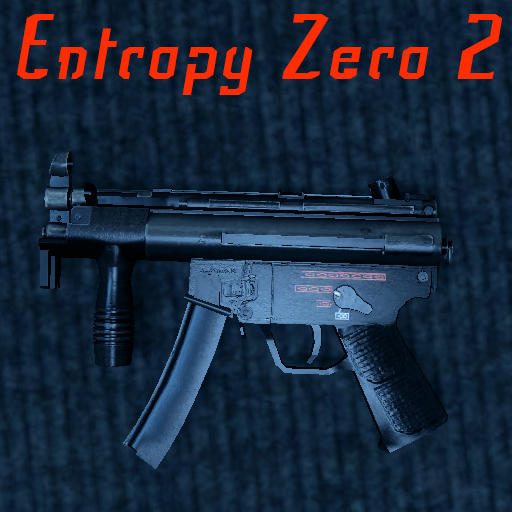
<style>
.page{position:relative;width:512px;height:512px}
.page>*{position:absolute;margin:0}
.t1{font:87.5px "Frak-Regular";color:#ff2e00}
</style>
<div class="page">
<p class="t1" style="left:17px;top:14px;width:486px;height:81px">Entropy Zero 2</p>
</div>
